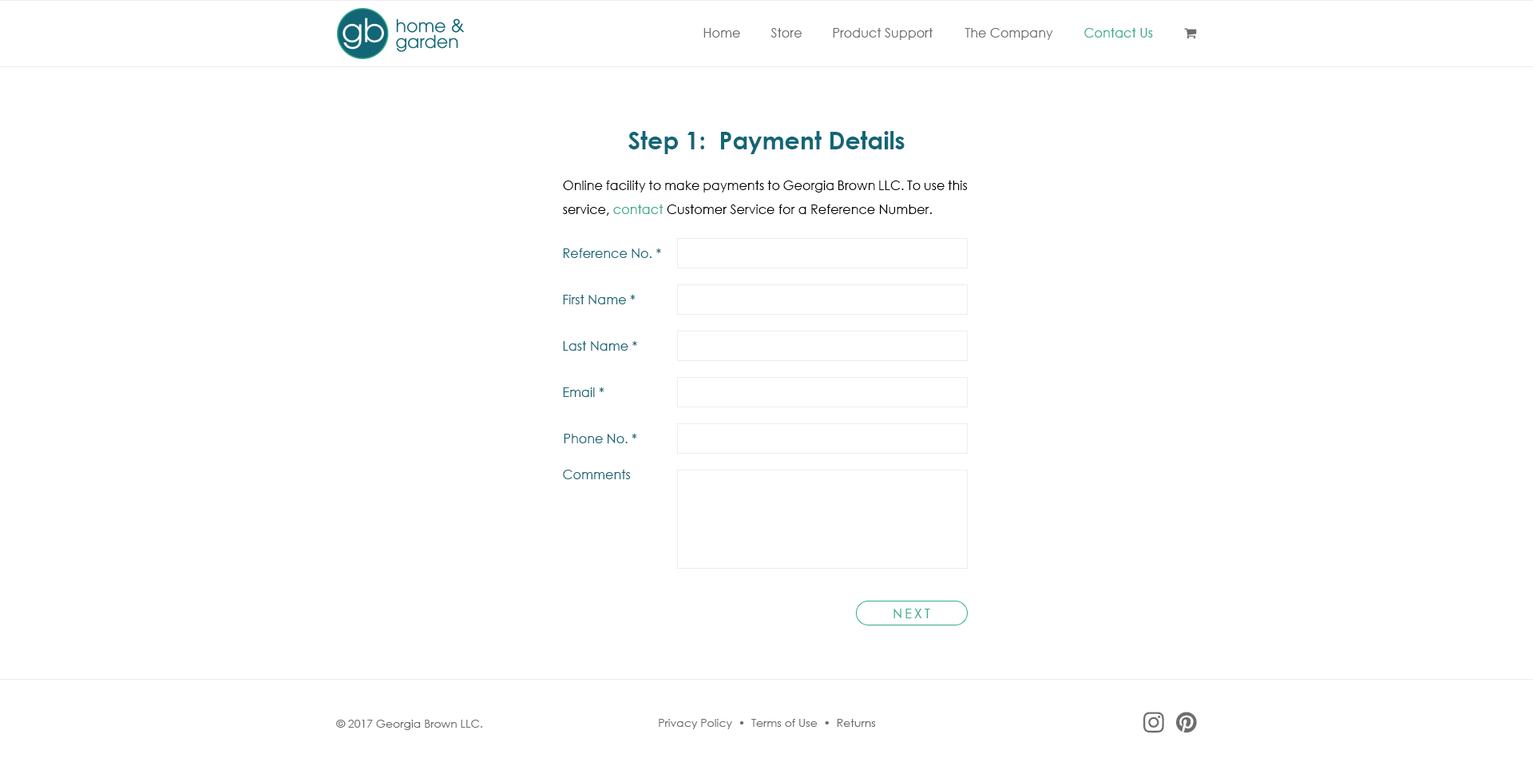
<style>
.page{position:relative;width:1533px;height:778px;background:#ffffff}
.page>*{position:absolute;margin:0}
.t1{font:12.8px "CenturyGothic";color:#6d6d6d}
.t2{font:12.8px "CenturyGothic";color:#34ab89}
.t3{font:24px "CenturyGothic-Bold";color:#126676}
.t4{font:12.8px/24px "CenturyGothic";color:#000000}
.t5{font:12.8px/24px "CenturyGothic";color:#34ab89}
.t6{font:12.8px "CenturyGothic";color:#126676}
.t7{font:12.8px "CenturyGothic";letter-spacing:0.2em;color:#34ab89}
.t8{font:11.2px "CenturyGothic";color:#6d6d6d}
</style>
<div class="page">
<p class="t1" style="left:703px;top:28px;width:37px;height:10px">Home</p>
<p class="t1" style="left:771px;top:28px;width:31px;height:10px">Store</p>
<p class="t1" style="left:833px;top:28px;width:100px;height:12px">Product Support</p>
<p class="t1" style="left:965px;top:28px;width:88px;height:12px">The Company</p>
<p class="t2" style="left:1084px;top:28px;width:69px;height:10px">Contact Us</p>
<p class="t3" style="left:628px;top:131px;width:277px;height:23px">Step 1:  Payment Details</p>
<p class="t4" style="left:563px;top:180px;width:405px;height:36px;text-align:justify">Online facility to make payments to Georgia Brown LLC. To use this service, <span class="t5">contact</span> Customer Service for a Reference Number.</p>
<p class="t6" style="left:563px;top:248px;width:98px;height:10px">Reference No. *</p>
<p class="t6" style="left:563px;top:295px;width:73px;height:9px">First Name *</p>
<p class="t6" style="left:563px;top:341px;width:74px;height:10px">Last Name *</p>
<p class="t6" style="left:563px;top:387px;width:41px;height:10px">Email *</p>
<p class="t6" style="left:564px;top:434px;width:73px;height:9px">Phone No. *</p>
<p class="t6" style="left:563px;top:470px;width:68px;height:9px">Comments</p>
<p class="t7" style="left:894px;top:608px;width:36px;height:10px">NEXT</p>
<p class="t8" style="left:336px;top:719px;width:146px;height:11px">© 2017 Georgia Brown LLC.</p>
<p class="t8" style="left:659px;top:719px;width:217px;height:10px">Privacy Policy  •  Terms of Use  •  Returns</p>
</div>
